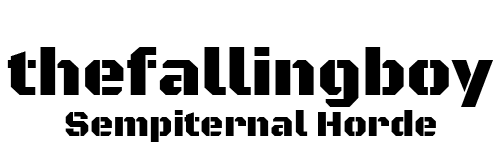
<style>
.page{position:relative;width:500px;height:150px;background:#ffffff}
.page>*{position:absolute;margin:0}
.t1{font:68px "BlackOpsOne-Regular";color:#000000}
.t2{font:36px "BlackOpsOne-Regular";color:#000000}
</style>
<div class="page">
<p class="t1" style="left:7px;top:47px;width:486px;height:60px">thefallingboy</p>
<p class="t2" style="left:65px;top:110px;width:371px;height:32px">Sempiternal Horde</p>
</div>
